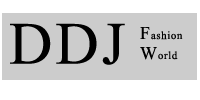
<style>
.page{position:relative;width:200px;height:100px;background:#cccccc}
.page>*{position:absolute;margin:0}
.t1{font:60px "TimesNewRomanPSMT";letter-spacing:0.05em;color:#000000}
.t2{font:11px/20px "TimesNewRomanPSMT";letter-spacing:0.05em;color:#000000}
.t3{font:18px/20px "TimesNewRomanPSMT";letter-spacing:0.05em;color:#000000}
</style>
<div class="page">
<p class="t1" style="left:10px;top:23px;width:115px;height:42px">DDJ</p>
<p class="t2" style="left:140px;top:27px;width:43px;height:33px"><span class="t3">F</span>ashion<br><span class="t3">W</span>orld</p>
</div>
